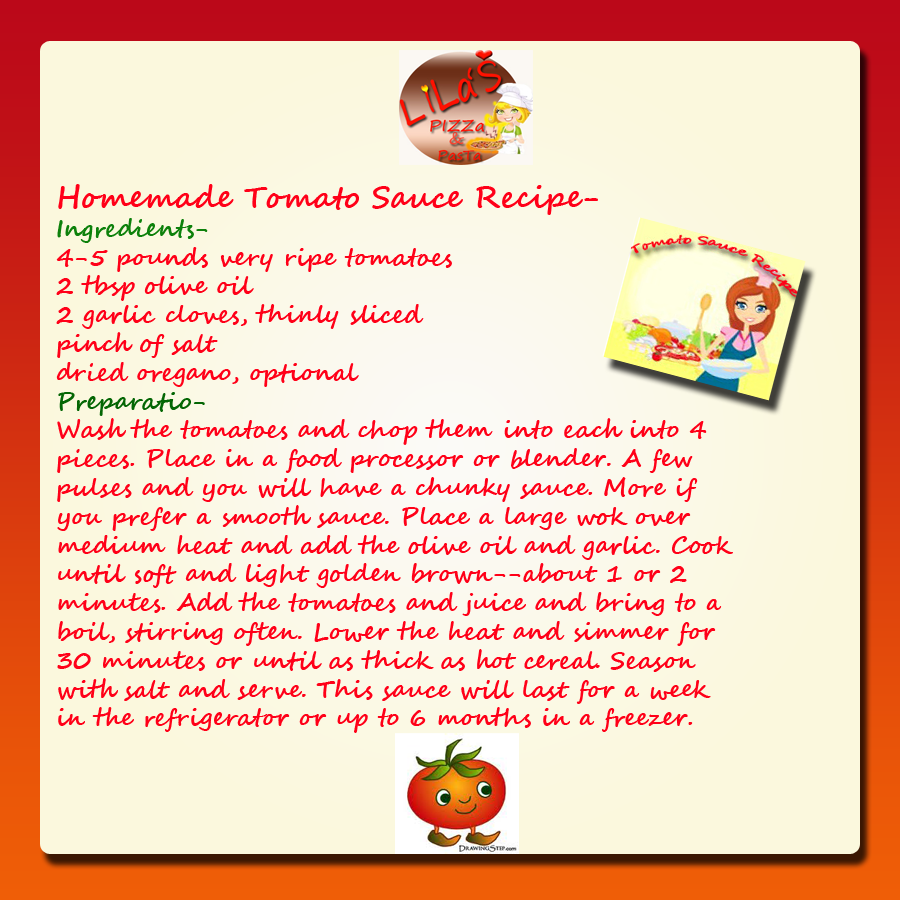
<style>
.page{position:relative;width:900px;height:900px;background:#fbf8dd}
.page>*{position:absolute;margin:0}
.t1{font:24px "SegoeScript-Bold";color:#ff0018}
.t2{font:30px "SegoeScript-Bold";color:#ff0018}
.t3{font:24px "SegoeScript-Bold";color:#0d810b}
.t4{font:24px "SegoeScript-Bold";color:#046604}
</style>
<div class="page">
<p class="t1" style="left:56px;top:184px;width:677px;height:549px"><span class="t2"><br>Homemade Tomato Sauce Recipe-<br></span><span class="t3">Ingredients-<br></span>4-5 pounds very ripe tomatoes <br>2 tbsp olive oil<br>2 garlic cloves, thinly sliced<br>pinch of salt<br>dried oregano, optional<br><span class="t4">Preparatio-<br></span>Wash the tomatoes and chop them into each into 4<br>pieces. Place in a food processor or blender. A few <br>pulses and you will have a chunky sauce. More if <br>you prefer a smooth sauce. Place a large wok over <br>medium heat and add the olive oil and garlic. Cook <br>until soft and light golden brown--about 1 or 2 <br>minutes. Add the tomatoes and juice and bring to a <br>boil, stirring often. Lower the heat and simmer for <br>30 minutes or until as thick as hot cereal. Season <br>with salt and serve. This sauce will last for a week <br>in the refrigerator or up to 6 months in a freezer.</p>
</div>
